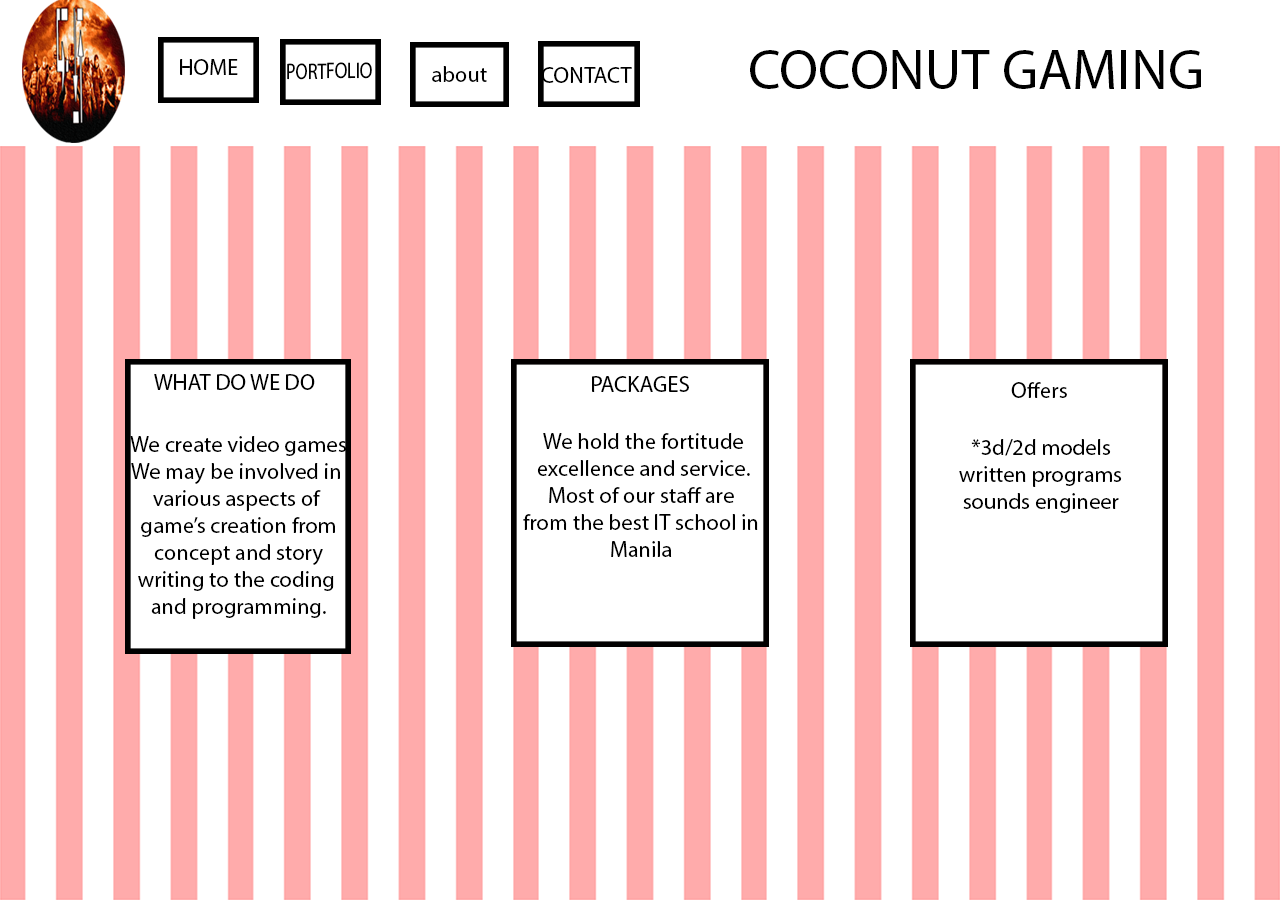
<style>
.page{position:relative;width:1280px;height:900px;background:#ffffff}
.page>*{position:absolute;margin:0}
.t1{font:56.2px "MyriadPro-Regular";color:#000000}
.t2{font:22.5px "MyriadPro-Regular";color:#000000}
.t3{font:12px "MyriadPro-Regular";color:#000000;scale:0.79 1}
.t4{font:12px "MyriadPro-Regular";color:#000000}
</style>
<div class="page">
<p class="t1" style="left:750px;top:50px;width:451px;height:39px">COCONUT GAMING</p>
<p class="t2" style="left:180px;top:59px;width:58px;height:16px">HOME</p>
<p class="t3" style="left:287px;top:62px;width:85px;height:18px;rotate:-1deg">PORTFOLIO</p>
<p class="t4" style="left:432px;top:66px;width:55px;height:16px">about</p>
<p class="t4" style="left:541px;top:67px;width:91px;height:16px">CONTACT</p>
<p class="t4" style="left:154px;top:374px;width:161px;height:16px">WHAT DO WE DO</p>
<p class="t4" style="left:592px;top:376px;width:97px;height:16px">PACKAGES</p>
<p class="t4" style="left:1011px;top:382px;width:56px;height:16px">Offers</p>
<p class="t4" style="left:130px;top:436px;width:217px;height:183px;text-align:center">We create video games<br>We may be involved in <br>various aspects of <br>game’s creation from<br>concept and story<br>writing to the coding <br>and programming.</p>
<p class="t4" style="left:523px;top:433px;width:235px;height:124px;text-align:center">We hold the fortitude<br>excellence and service.<br>Most of our staff are <br>from the best IT school in <br>Manila</p>
<p class="t4" style="left:959px;top:439px;width:163px;height:74px;text-align:center">*3d/2d models<br>written programs<br>sounds engineer</p>
</div>
